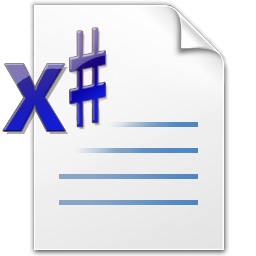
<style>
.page{position:relative;width:256px;height:256px;background:#ffffff}
.page>*{position:absolute;margin:0}
.t1{font:94.6px "SegoeUI-Bold"}
</style>
<div class="page">
<p class="t1" style="left:3px;top:64px;width:62px;height:67px">X</p>
</div>
